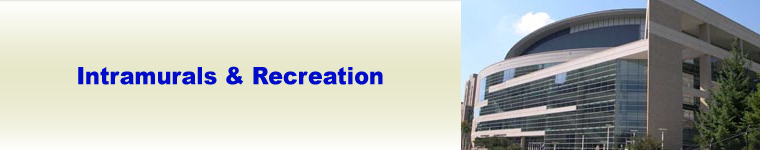
<style>
.page{position:relative;width:760px;height:150px}
.page>*{position:absolute;margin:0}
.t1{font:24px "Arial-Black";color:#000cc9;scale:0.92 1}
</style>
<div class="page">
<p class="t1" style="left:78px;top:66px;width:305px;height:19px">Intramurals &amp; Recreation</p>
</div>
